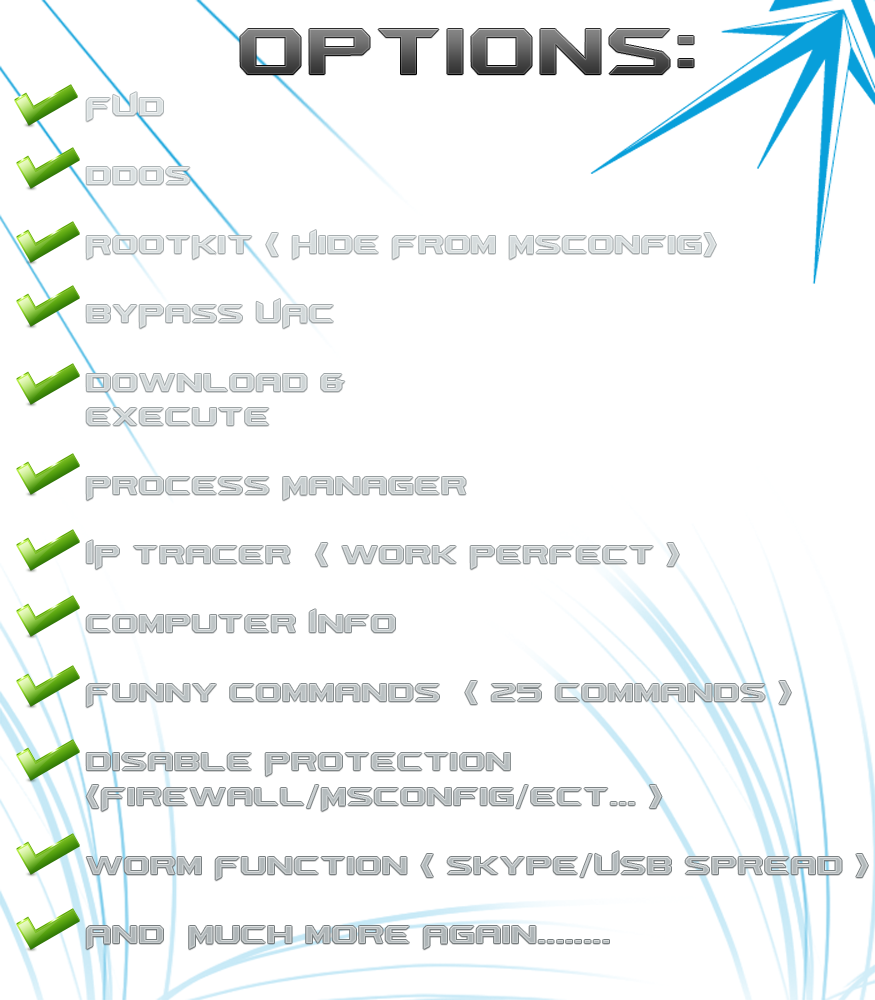
<style>
.page{position:relative;width:875px;height:1000px;background:#ffffff}
.page>*{position:absolute;margin:0}
.t1{font:75px "AeromaticsNC"}
.t2{font:28.8px "AeromaticsNC"}
</style>
<div class="page">
<p class="t1" style="left:240px;top:29px;width:454px;height:45px">Options:</p>
<p class="t2" style="left:86px;top:92px;width:782px;height:857px">FUD  <br><br>DDOS  <br><br>RootKit ( Hide From Msconfig) <br><br>ByPass UAC  <br><br>download &amp; <br>execute  <br><br>Process Manager <br><br>IP tracer  ( Work Perfect ) <br><br>Computer Info <br><br>Funny Commands  ( 25 Commands ) <br><br>Disable Protection <br>(FireWall/Msconfig/Ect... )<br><br>Worm Function ( Skype/USB Spread ) <br><br>And  Much more Again........</p>
</div>
